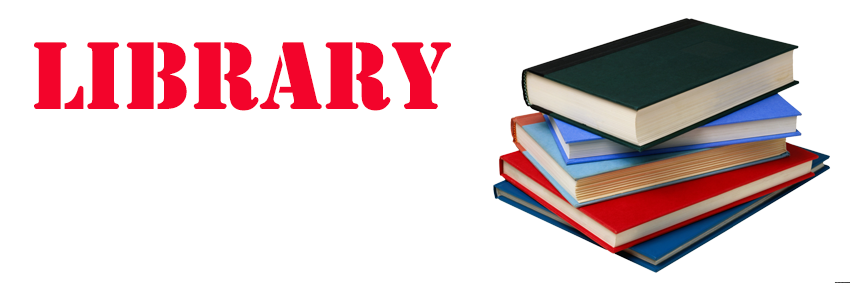
<style>
.page{position:relative;width:850px;height:283px;background:#ffffff}
.page>*{position:absolute;margin:0}
.t1{font:100px "Stencil";color:#f3042b}
</style>
<div class="page">
<p class="t1" style="left:34px;top:42px;width:417px;height:69px">Library</p>
</div>
